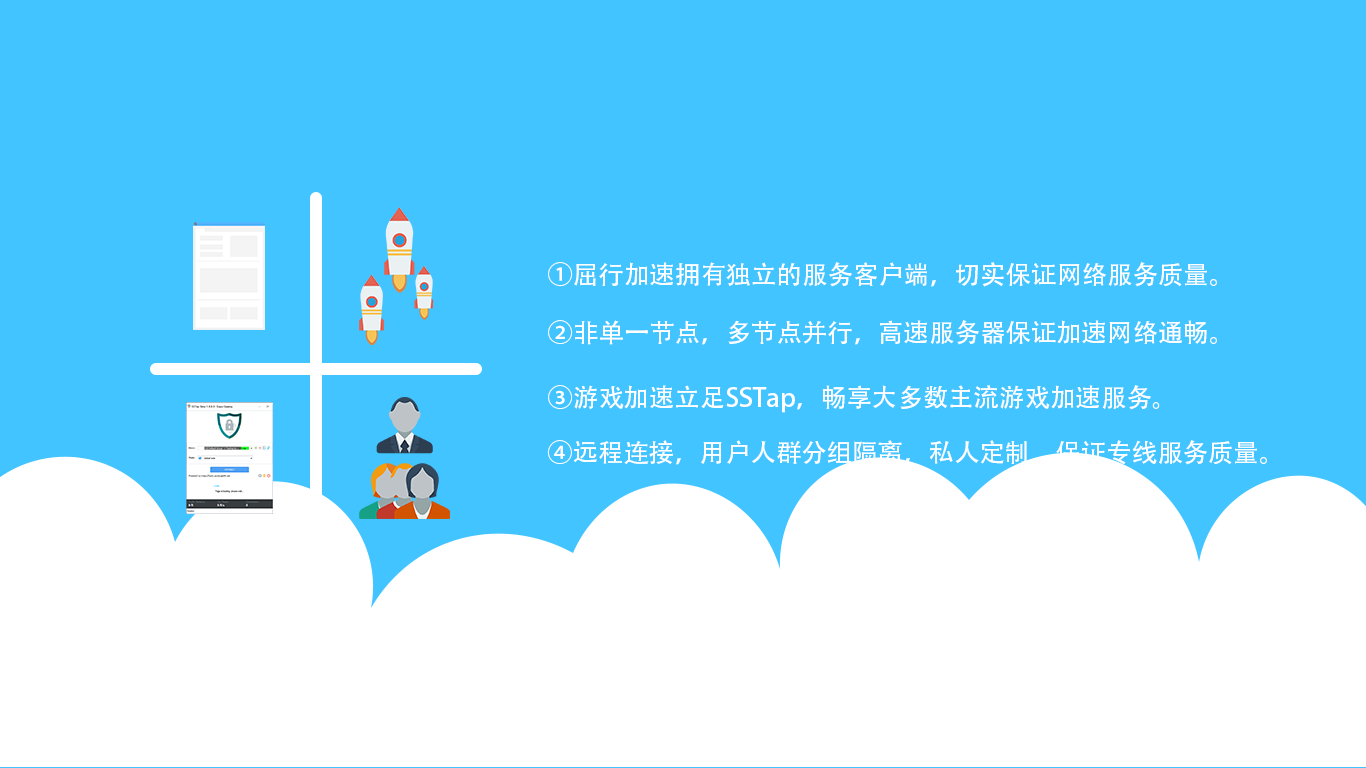
<style>
.page{position:relative;width:1366px;height:768px;background:#41c4ff}
.page>*{position:absolute;margin:0}
.t1{font:25.4px "AdobeHeitiStd-Regular";color:#ffffff}
</style>
<div class="page">
<p class="t1" style="left:548px;top:262px;width:669px;height:25px">①屈行加速拥有独立的服务客户端，切实保证网络服务质量。</p>
<p class="t1" style="left:548px;top:320px;width:669px;height:25px">②非单一节点，多节点并行，高速服务器保证加速网络通畅。</p>
<p class="t1" style="left:548px;top:385px;width:612px;height:28px">③游戏加速立足SSTap，畅享大多数主流游戏加速服务。</p>
<p class="t1" style="left:547px;top:440px;width:720px;height:25px">④远程连接，用户人群分组隔离，私人定制，保证专线服务质量。</p>
</div>
